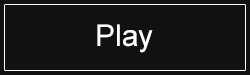
<style>
.page{position:relative;width:250px;height:75px;background:#111111}
.page>*{position:absolute;margin:0}
.t1{font:30px "ArialMT";color:#ffffff}
</style>
<div class="page">
<p class="t1" style="left:97px;top:24px;width:56px;height:29px">Play</p>
</div>
